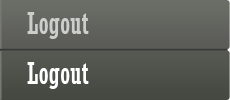
<style>
.page{position:relative;width:230px;height:100px}
.page>*{position:absolute;margin:0}
.t1{font:30px "Rockwell-Condensed";color:#cccecb}
.t2{font:30px "Rockwell-Condensed";color:#fefffe}
</style>
<div class="page">
<p class="t1" style="left:27px;top:12px;width:62px;height:27px">Logout</p>
<p class="t2" style="left:27px;top:62px;width:62px;height:27px">Logout</p>
</div>
